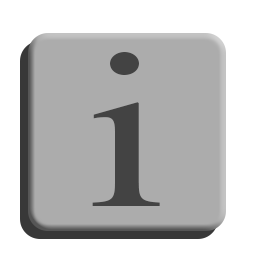
<style>
.page{position:relative;width:256px;height:256px;background:#acacac}
.page>*{position:absolute;margin:0}
.t1{font:225px "STIXGeneral-Regular";color:#434343;scale:1.26 1}
</style>
<div class="page">
<p class="t1" style="left:92px;top:52px;width:68px;height:154px">i</p>
</div>
